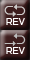
<style>
.page{position:relative;width:30px;height:60px}
.page>*{position:absolute;margin:0}
.t1{font:10.7px "SimianText-Orangutan";color:#ffffff}
</style>
<div class="page">
<p class="t1" style="left:6px;top:18px;width:19px;height:7px">REV</p>
<p class="t1" style="left:6px;top:47px;width:19px;height:7px">REV</p>
</div>
